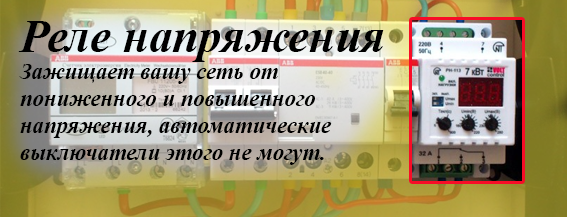
<style>
.page{position:relative;width:567px;height:217px}
.page>*{position:absolute;margin:0}
.t1{font:22.7px "TimesNewRomanPS-BoldItalicMT";color:#000000}
.t2{font:46.7px "TimesNewRomanPS-BoldItalicMT";color:#000000}
</style>
<div class="page">
<p class="t1" style="left:18px;top:21px;width:366px;height:144px;text-align:right"><span class="t2">Реле напряжения<br></span>Зажищает вашу сеть от пониженного и повышенного напряжения, автоматические выключатели этого не могут.</p>
</div>
